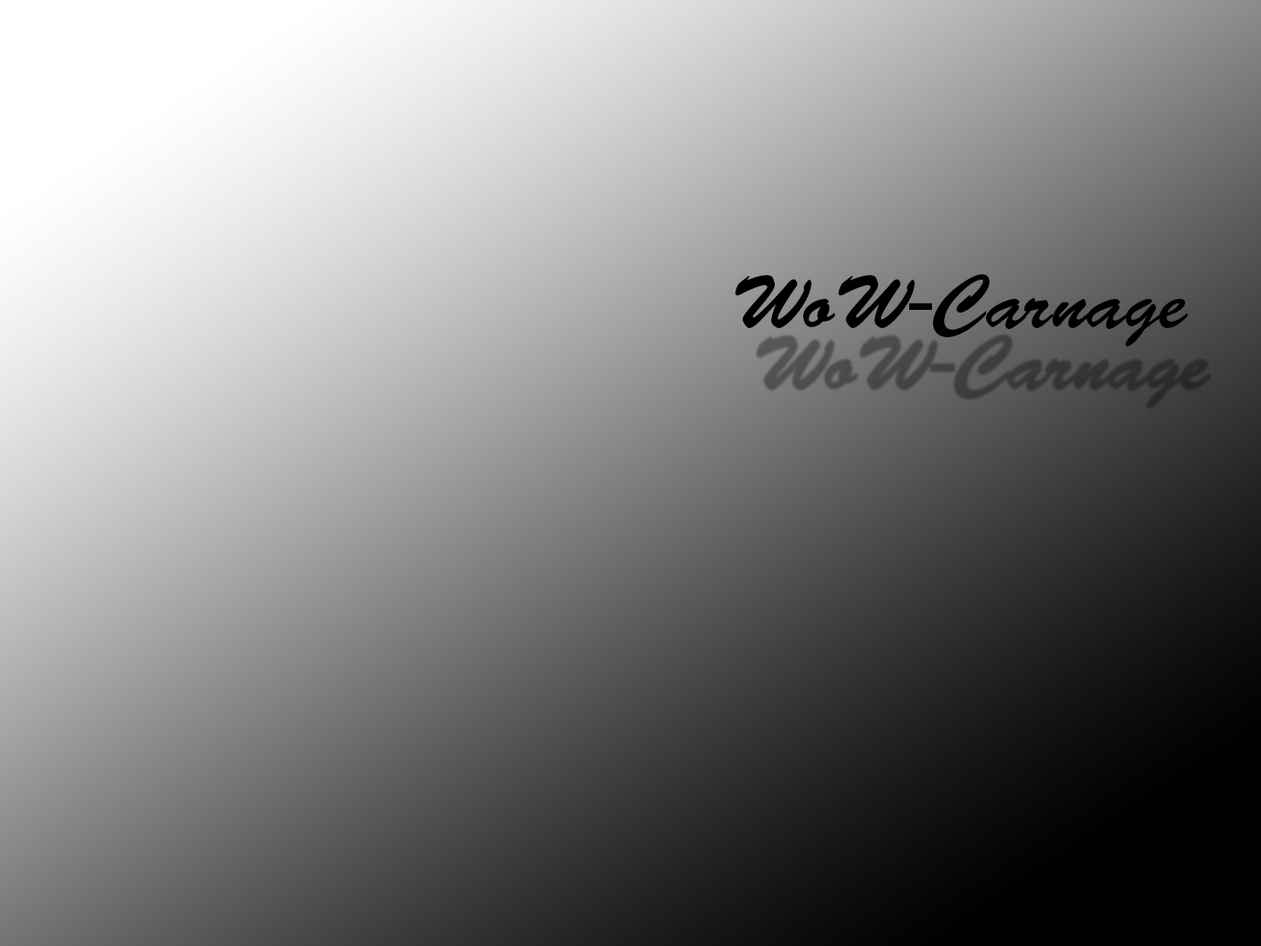
<style>
.page{position:relative;width:1261px;height:946px}
.page>*{position:absolute;margin:0}
.t1{font:76.1px "BrushScriptStd";color:#000000}
</style>
<div class="page">
<p class="t1" style="left:735px;top:274px;width:453px;height:72px">WoW-Carnage</p>
</div>
